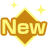
<style>
.page{position:relative;width:48px;height:47px;background:#ffffff}
.page>*{position:absolute;margin:0}
.t1{font:18px "tPShinGoPr6N-Bold";color:#fcf87b}
</style>
<div class="page">
<p class="t1" style="left:2px;top:19px;width:44px;height:15px">New</p>
</div>
